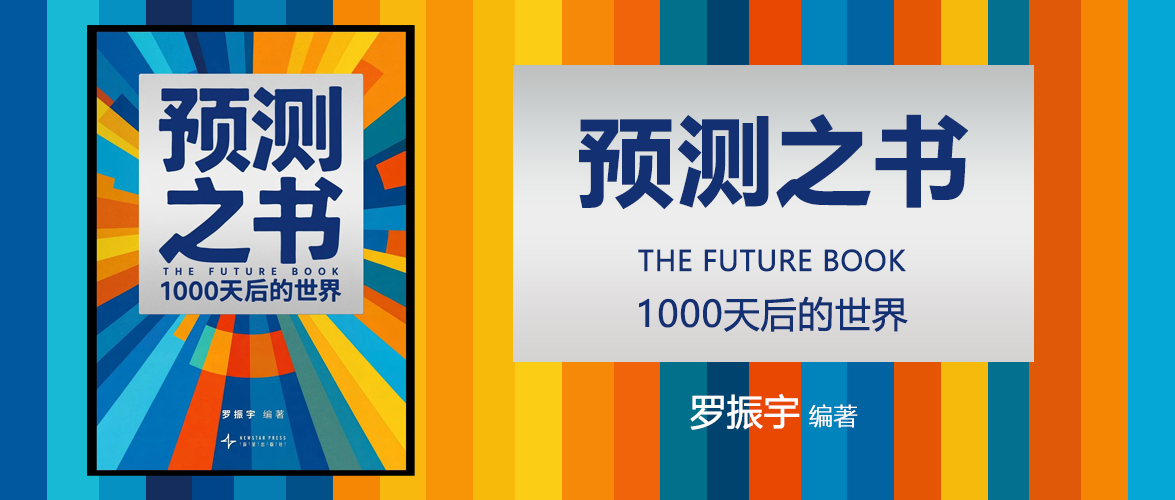
<style>
.page{position:relative;width:1175px;height:500px}
.page>*{position:absolute;margin:0}
.t1{font:96px "MicrosoftYaHei-Bold";color:#133072;font-weight:bold}
.t2{font:28px "MicrosoftYaHei";color:#133072;font-weight:bold}
.t3{font:36px "MicrosoftYaHei";color:#133072;font-weight:bold}
.t4{font:36px "MicrosoftYaHei";color:#ffffff;font-weight:bold}
.t5{font:24px "MicrosoftYaHeiLight";color:#ffffff;font-weight:bold}
</style>
<div class="page">
<p class="t1" style="left:579px;top:114px;width:389px;height:96px">预测之书</p>
<p class="t2" style="left:638px;top:249px;width:270px;height:83px;text-align:center">THE FUTURE BOOK<br><span class="t3">1000天后的世界</span></p>
<p class="t4" style="left:690px;top:393px;width:168px;height:37px">罗振宇<span class="t5"> 编著</span></p>
</div>
